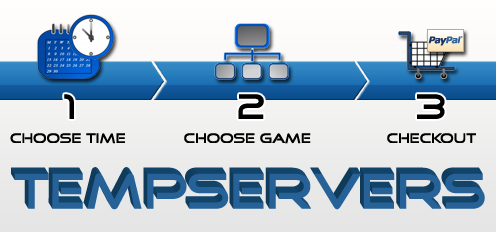
<style>
.page{position:relative;width:496px;height:232px}
.page>*{position:absolute;margin:0}
.t1{font:36px "GoodTimes";color:#000000}
.t2{font:14px "GoodTimes";color:#000000}
</style>
<div class="page">
<p class="t1" style="left:64px;top:94px;width:381px;height:25px">1              2             3</p>
<p class="t2" style="left:10px;top:133px;width:466px;height:11px">Choose Time             Choose Game                 Checkout</p>
</div>
